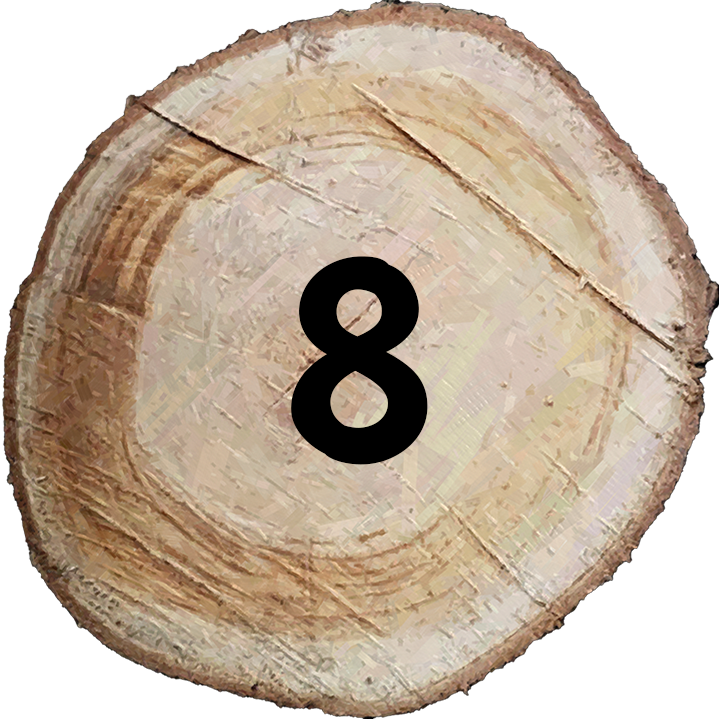
<style>
.page{position:relative;width:720px;height:720px;background:#ffffff}
.page>*{position:absolute;margin:0}
.t1{font:277.8px "BMEULJIRO";letter-spacing:-0.08em;color:#000000}
</style>
<div class="page">
<p class="t1" style="left:291px;top:256px;width:137px;height:209px">8</p>
</div>
